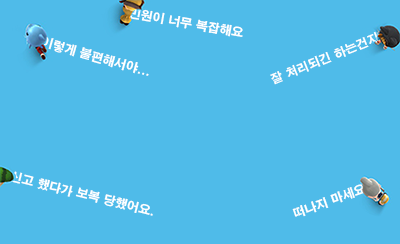
<style>
.page{position:relative;width:400px;height:244px;background:#4fbbe9}
.page>*{position:absolute;margin:0}
.t1{font:12px "H2gtrE";color:#ffffff}
.t2{font:11.9px "H2gtrE";color:#ffffff}
</style>
<div class="page">
<p class="t1" style="left:129px;top:7px;width:114px;height:30px;rotate:10deg">민원이 너무 복잡해요</p>
<p class="t1" style="left:41px;top:36px;width:108px;height:40px;rotate:16deg">이렇게 불편해서야...</p>
<p class="t1" style="left:270px;top:31px;width:122px;height:54px;rotate:-22deg">잘 처리되긴 하는건지...</p>
<p class="t2" style="left:10px;top:171px;width:143px;height:45px;rotate:14deg">신고 했다가 보복 당했어요.</p>
<p class="t1" style="left:292px;top:184px;width:86px;height:33px;rotate:-19deg">떠나지 마세요...</p>
</div>
